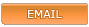
<style>
.page{position:relative;width:89px;height:27px;background:#ffffff}
.page>*{position:absolute;margin:0}
.t1{font:11px "Verdana";color:#ffffff}
</style>
<div class="page">
<p class="t1" style="left:28px;top:10px;width:34px;height:8px">EMAIL</p>
</div>
